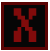
<style>
.page{position:relative;width:50px;height:51px;background:#060606}
.page>*{position:absolute;margin:0}
.t1{font:48px "Fixedsys";color:#820b0b}
</style>
<div class="page">
<p class="t1" style="left:13px;top:8px;width:24px;height:34px">X</p>
</div>
